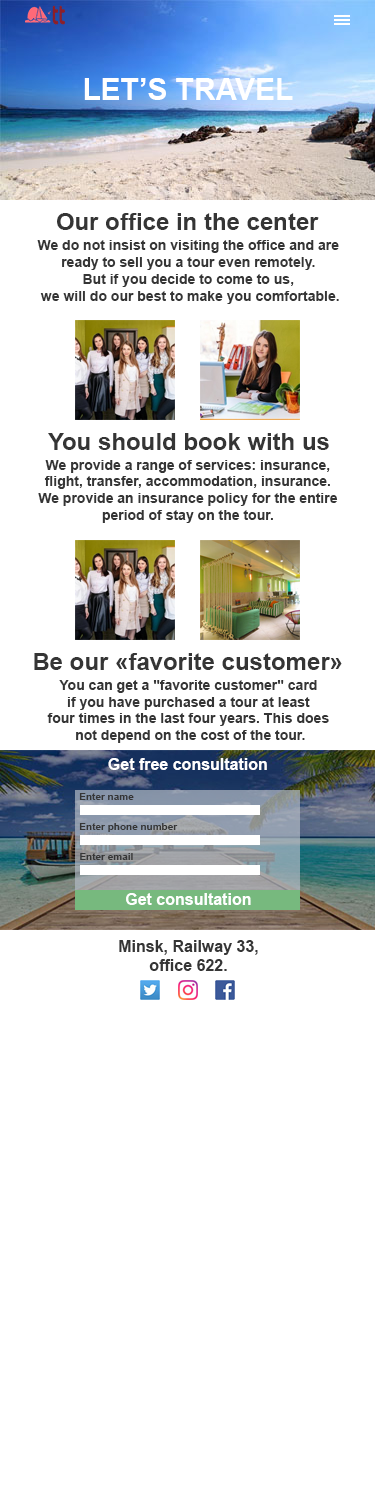
<style>
.page{position:relative;width:375px;height:1500px;background:#ffffff}
.page>*{position:absolute;margin:0}
.t1{font:30px "Arial-BoldMT";color:#ffffff}
.t2{font:24px "Arial-BoldMT";color:#353535}
.t3{font:14px "Arial-BoldMT";color:#353535}
.t4{font:16px "Arial-BoldMT";color:#ffffff}
.t5{font:10px "Arial-BoldMT";color:#353535}
.t6{font:16px "Arial-BoldMT";color:#353535}
</style>
<div class="page">
<p class="t1" style="left:84px;top:78px;width:209px;height:22px">LET’S TRAVEL</p>
<p class="t2" style="left:57px;top:213px;width:262px;height:17px">Our office in the center</p>
<p class="t3" style="left:37px;top:240px;width:302px;height:64px;text-align:center">We do not insist on visiting the office and are <br>ready to sell you a tour even remotely. <br>But if you decide to come to us, <br>we will do our best to make you comfortable.</p>
<p class="t2" style="left:48px;top:433px;width:281px;height:17px">You should book with us</p>
<p class="t3" style="left:38px;top:460px;width:300px;height:63px;text-align:center">We provide a range of services: insurance, <br>flight, transfer, accommodation, insurance. <br>We provide an insurance policy for the entire <br>period of stay on the tour.</p>
<p class="t2" style="left:34px;top:653px;width:308px;height:17px">Be our «favorite customer»</p>
<p class="t3" style="left:47px;top:680px;width:282px;height:63px;text-align:center">You can get a "favorite customer" card <br>if you have purchased a tour at least <br>four times in the last four years. This does <br>not depend on the cost of the tour.</p>
<p class="t4" style="left:108px;top:758px;width:159px;height:12px">Get free consultation</p>
<p class="t5" style="left:79px;top:793px;width:55px;height:7px">Enter name</p>
<p class="t5" style="left:79px;top:823px;width:99px;height:9px">Enter phone number</p>
<p class="t5" style="left:80px;top:853px;width:53px;height:7px">Enter email</p>
<p class="t4" style="left:126px;top:893px;width:125px;height:12px">Get consultation</p>
<p class="t6" style="left:119px;top:940px;width:139px;height:31px;text-align:center">Minsk, Railway 33,<br>office 622.</p>
</div>
